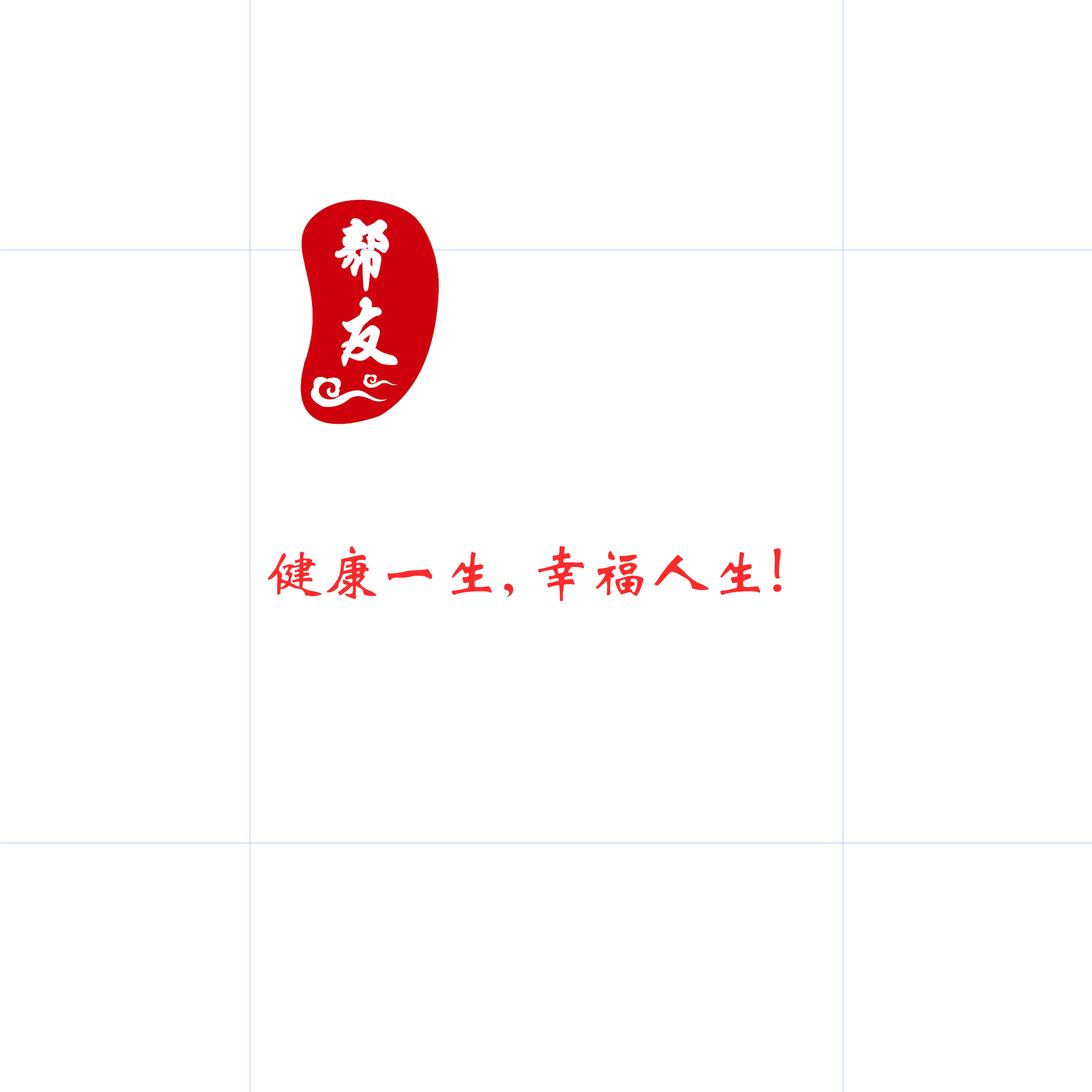
<style>
.page{position:relative;width:1092px;height:1092px;background:#ffffff}
.page>*{position:absolute;margin:0}
.t1{font:59.3px "STXinwei";color:#fb2a2b}
</style>
<div class="page">
<p class="t1" style="left:268px;top:546px;width:513px;height:55px">健康一生, 幸福人生!</p>
</div>
